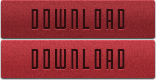
<style>
.page{position:relative;width:156px;height:80px}
.page>*{position:absolute;margin:0}
.t1{font:20px "Airship27";letter-spacing:0.14em;color:#2f0e10}
</style>
<div class="page">
<p class="t1" style="left:31px;top:9px;width:94px;height:20px">DOWNLOAD</p>
<p class="t1" style="left:31px;top:49px;width:94px;height:20px">DOWNLOAD</p>
</div>
